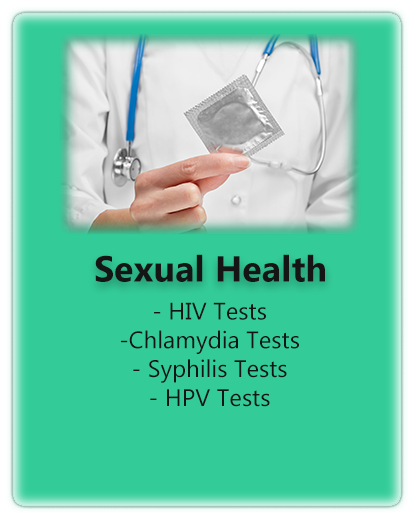
<style>
.page{position:relative;width:420px;height:520px;background:#33cc99}
.page>*{position:absolute;margin:0}
.t1{font:36px "Gadugi-Bold";color:#151515}
.t2{font:24px "Gadugi";color:#151515}
</style>
<div class="page">
<p class="t1" style="left:95px;top:254px;width:230px;height:28px">Sexual Health</p>
<p class="t2" style="left:121px;top:302px;width:178px;height:105px;text-align:center">- HIV Tests<br>-Chlamydia Tests<br>- Syphilis Tests<br>- HPV Tests</p>
</div>
